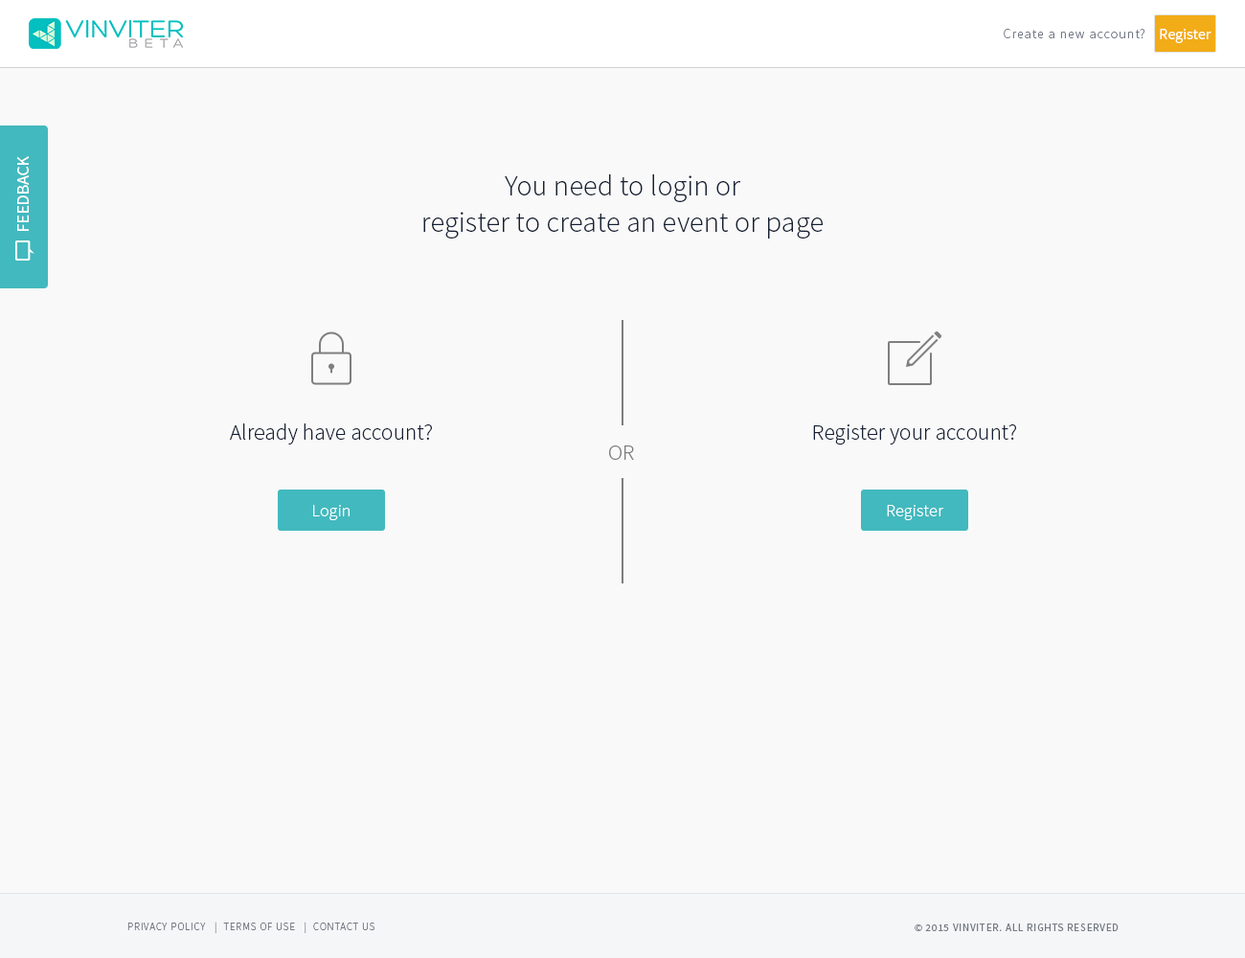
<style>
.page{position:relative;width:1245px;height:958px;background:#f9f9f9}
.page>*{position:absolute;margin:0}
.t1{font:13.4px "SourceSansPro-Light";letter-spacing:0.075em;color:#747a85}
.t2{font:15.3px "SourceSansPro-Regular";color:#ffffff}
.t3{font:17.2px "SourceSansPro-Regular";color:#ffffff}
.t4{font:28.7px/17.2px "SourceSansPro-Light";letter-spacing:0.01em;color:#162135}
.t5{font:22px "SourceSansPro-Light";letter-spacing:0.01em;color:#162135}
.t6{font:22px "SourceSansPro-Light";letter-spacing:0.01em;color:#7d7d7d}
.t7{font:17.2px "SourceSansPro-Light";letter-spacing:0.01em;color:#ffffff}
.t8{font:10.5px "SourceSansPro-Light";letter-spacing:0.075em;color:#747a85;text-transform:uppercase}
.t9{font:10.5px "SourceSansPro-Regular";letter-spacing:0.075em;color:#747a85;text-transform:uppercase}
</style>
<div class="page">
<p class="t1" style="left:1004px;top:29px;width:141px;height:9px">Create a new account?</p>
<p class="t2" style="left:1160px;top:29px;width:52px;height:14px">Register</p>
<p class="t3" style="left:17px;top:156px;width:12px;height:75px;rotate:-90deg">FEEDBACK</p>
<p class="t4" style="left:423px;top:174px;width:400px;height:64px;text-align:center">You need to login or<br>register to create an event or page</p>
<p class="t5" style="left:230px;top:423px;width:202px;height:21px">Already have account?</p>
<p class="t5" style="left:813px;top:424px;width:203px;height:21px">Register your account?</p>
<p class="t6" style="left:609px;top:445px;width:25px;height:15px">OR</p>
<p class="t7" style="left:313px;top:505px;width:37px;height:15px">Login</p>
<p class="t7" style="left:887px;top:505px;width:57px;height:15px">Register</p>
<p class="t8" style="left:127px;top:921px;width:248px;height:12px">Privacy Policy   |  Terms of Use   |  Contact us</p>
<p class="t9" style="left:915px;top:923px;width:204px;height:8px">© 2015 VINVITER. All rights reserved</p>
</div>
